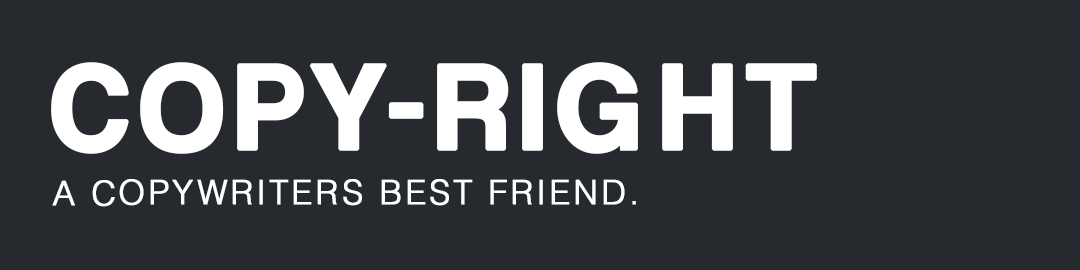
<style>
.page{position:relative;width:1080px;height:270px;background:#26292e}
.page>*{position:absolute;margin:0}
.t1{font:125px "CoolveticaRg-Regular";letter-spacing:0.075em;color:#ffffff;font-weight:bold}
.t2{font:33.9px "Helvetica-Light";letter-spacing:0.075em;color:#ffffff;font-weight:bold}
</style>
<div class="page">
<p class="t1" style="left:51px;top:62px;width:766px;height:92px">COPY-RIGHT</p>
<p class="t2" style="left:52px;top:179px;width:584px;height:28px">A COPYWRITERS BEST FRIEND.</p>
</div>
